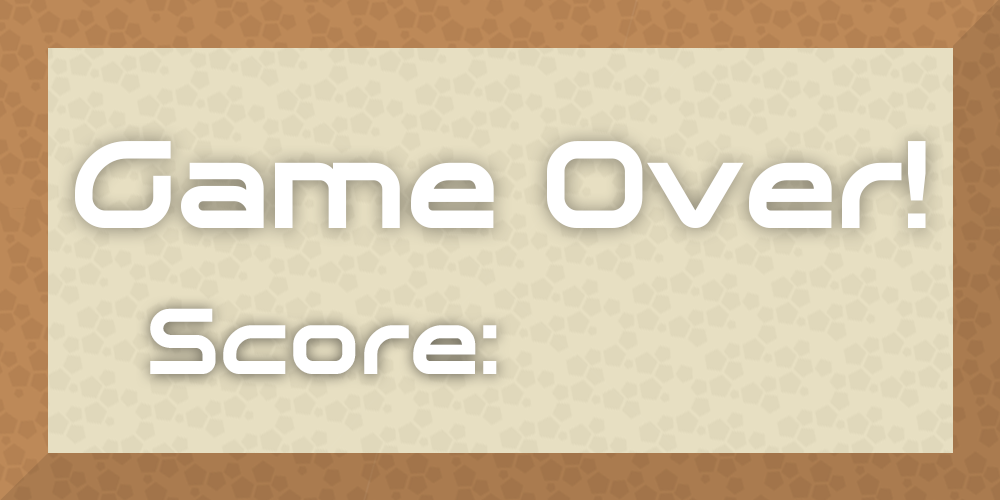
<style>
.page{position:relative;width:1000px;height:500px;background:#e7dfc2}
.page>*{position:absolute;margin:0}
.t1{font:120px "Planetium-XBoldDemo";letter-spacing:-0.025em;color:#ffffff}
.t2{font:90px "Planetium-XBoldDemo";letter-spacing:-0.025em;color:#ffffff}
</style>
<div class="page">
<p class="t1" style="left:75px;top:141px;width:851px;height:87px">Game Over!</p>
<p class="t2" style="left:150px;top:308px;width:347px;height:66px">Score:</p>
</div>
